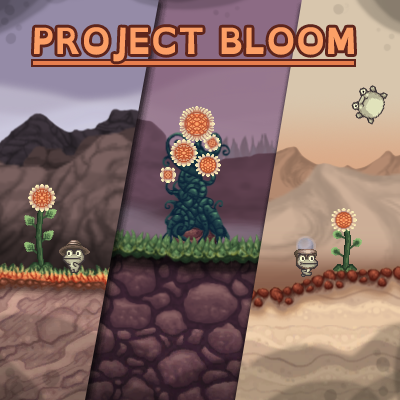
<style>
.page{position:relative;width:400px;height:400px}
.page>*{position:absolute;margin:0}
.t1{font:36px "OpenDyslexic-Bold";color:#fc9f66}
</style>
<div class="page">
<p class="t1" style="left:34px;top:27px;width:320px;height:35px">PROJECT BLOOM</p>
</div>
